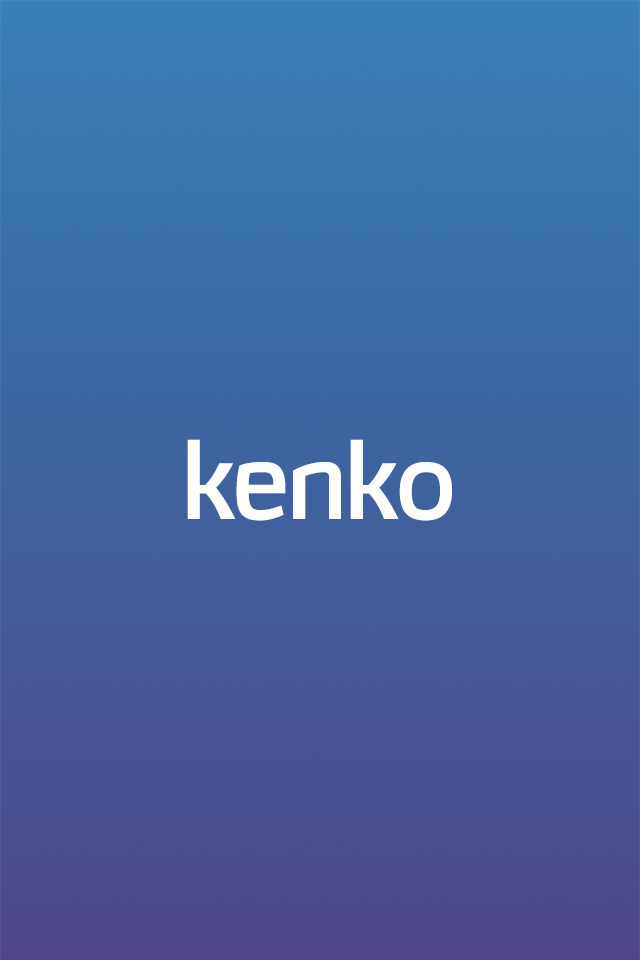
<style>
.page{position:relative;width:640px;height:960px}
.page>*{position:absolute;margin:0}
.t1{font:100px "Hybrea";color:#ffffff}
</style>
<div class="page">
<p class="t1" style="left:187px;top:439px;width:265px;height:82px">kenko</p>
</div>
